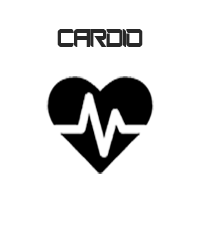
<style>
.page{position:relative;width:200px;height:250px;background:#ffffff}
.page>*{position:absolute;margin:0}
.t1{font:21.8px "Amazing-Spider-Man";color:#282828;scale:0.93 1}
</style>
<div class="page">
<p class="t1" style="left:57px;top:29px;width:86px;height:18px">CARDIO</p>
</div>
